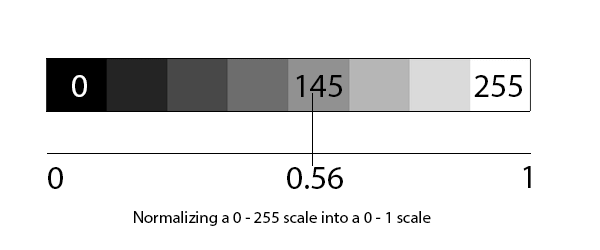
<style>
.page{position:relative;width:600px;height:250px;background:#ffffff}
.page>*{position:absolute;margin:0}
.t1{font:33.3px "MyriadPro-Regular";color:#ffffff}
.t2{font:33.3px "MyriadPro-Regular";color:#000000}
.t3{font:16.7px "MyriadPro-Regular";color:#000000}
</style>
<div class="page">
<p class="t1" style="left:72px;top:75px;width:15px;height:22px">0</p>
<p class="t2" style="left:296px;top:75px;width:46px;height:22px">145</p>
<p class="t2" style="left:474px;top:75px;width:48px;height:22px">255</p>
<p class="t2" style="left:48px;top:167px;width:15px;height:22px">0</p>
<p class="t2" style="left:287px;top:167px;width:56px;height:22px">0.56</p>
<p class="t2" style="left:523px;top:166px;width:8px;height:22px">1</p>
<p class="t3" style="left:134px;top:211px;width:297px;height:15px">Normalizing a 0 - 255 scale into a 0 - 1 scale</p>
</div>
